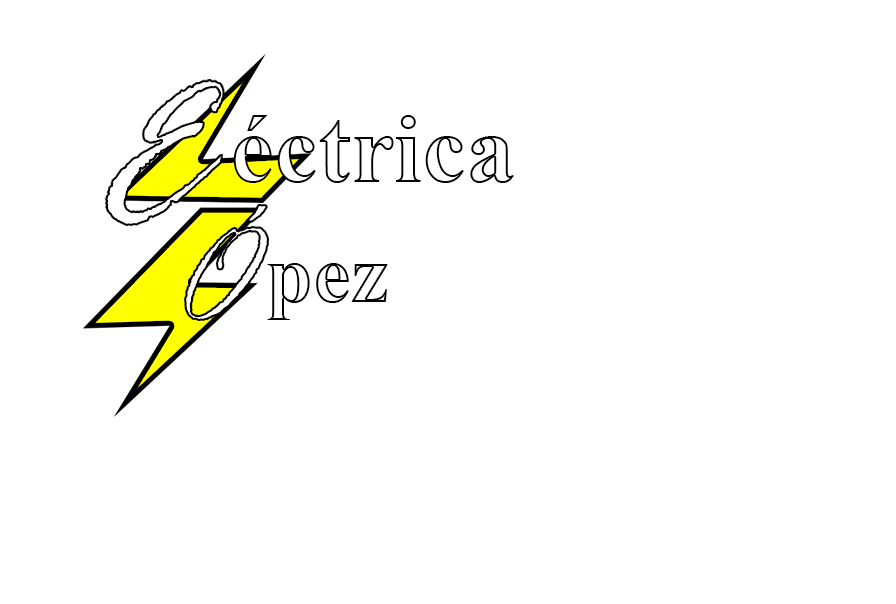
<style>
.page{position:relative;width:896px;height:604px;background:#ffffff}
.page>*{position:absolute;margin:0}
.t1{font:98.7px "TimesNewRomanPS-BoldMT"}
.t2{font:147.3px "RageItalic"}
.t3{font:85.4px "TimesNewRomanPS-BoldMT"}
</style>
<div class="page">
<p class="t1" style="left:233px;top:115px;width:281px;height:68px">éctrica</p>
<p class="t2" style="left:184px;top:204px;width:85px;height:117px">Ó</p>
<p class="t3" style="left:267px;top:263px;width:121px;height:57px">pez</p>
</div>
